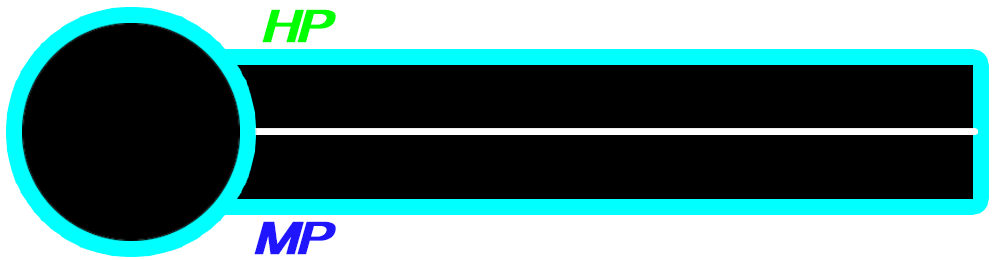
<style>
.page{position:relative;width:1000px;height:260px;background:#000000}
.page>*{position:absolute;margin:0}
.t1{font:40.1px "HGPGothicE";letter-spacing:-0.07em;color:#00ff00;font-weight:bold;font-style:italic;scale:1.6 1}
.t2{font:40.1px "HGPGothicE";letter-spacing:-0.07em;color:#2015ff;font-weight:bold;font-style:italic;scale:1.6 1}
</style>
<div class="page">
<p class="t1" style="left:262px;top:9px;width:74px;height:34px">HP</p>
<p class="t2" style="left:254px;top:221px;width:82px;height:34px">MP</p>
</div>
